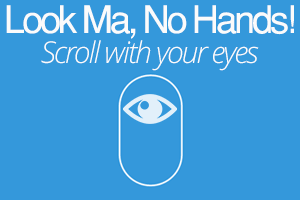
<style>
.page{position:relative;width:300px;height:200px;background:#3498db}
.page>*{position:absolute;margin:0}
.t1{font:38px "Helvetica-Normal";letter-spacing:-0.085em;color:#fbfbfb}
.t2{font:30px "OpenSansLight-Italic";letter-spacing:-0.065em;color:#fbfbfb}
</style>
<div class="page">
<p class="t1" style="left:6px;top:5px;width:288px;height:34px">Look Ma, No Hands!</p>
<p class="t2" style="left:41px;top:40px;width:218px;height:31px">Scroll with your eyes</p>
</div>
